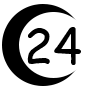
<style>
.page{position:relative;width:85px;height:91px;background:#ffffff}
.page>*{position:absolute;margin:0}
.t1{font:47.7px "ComicSansMS";color:#000000}
</style>
<div class="page">
<p class="t1" style="left:27px;top:27px;width:54px;height:38px">24</p>
</div>
